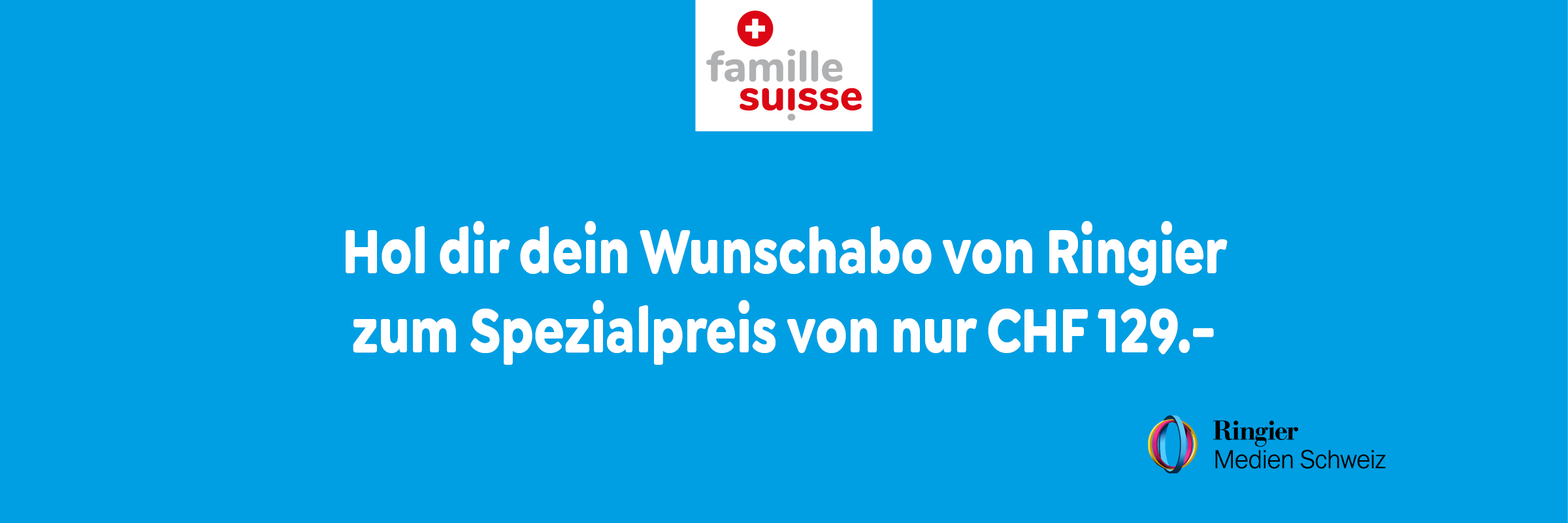
<style>
.page{position:relative;width:1568px;height:523px;background:#009fe3}
.page>*{position:absolute;margin:0}
.t1{font:66.3px "Goldplay-Bold";color:#ffffff;scale:0.78 1}
</style>
<div class="page">
<p class="t1" style="left:346px;top:221px;width:882px;height:144px;text-align:center">Hol dir dein Wunschabo von Ringier<br>zum Spezialpreis von nur CHF 129.-</p>
</div>
